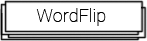
<style>
.page{position:relative;width:147px;height:41px;background:#ffffff}
.page>*{position:absolute;margin:0}
.t1{font:18px "Roboto-Thin";color:#000000}
</style>
<div class="page">
<p class="t1" style="left:36px;top:8px;width:70px;height:18px">WordFlip</p>
</div>
